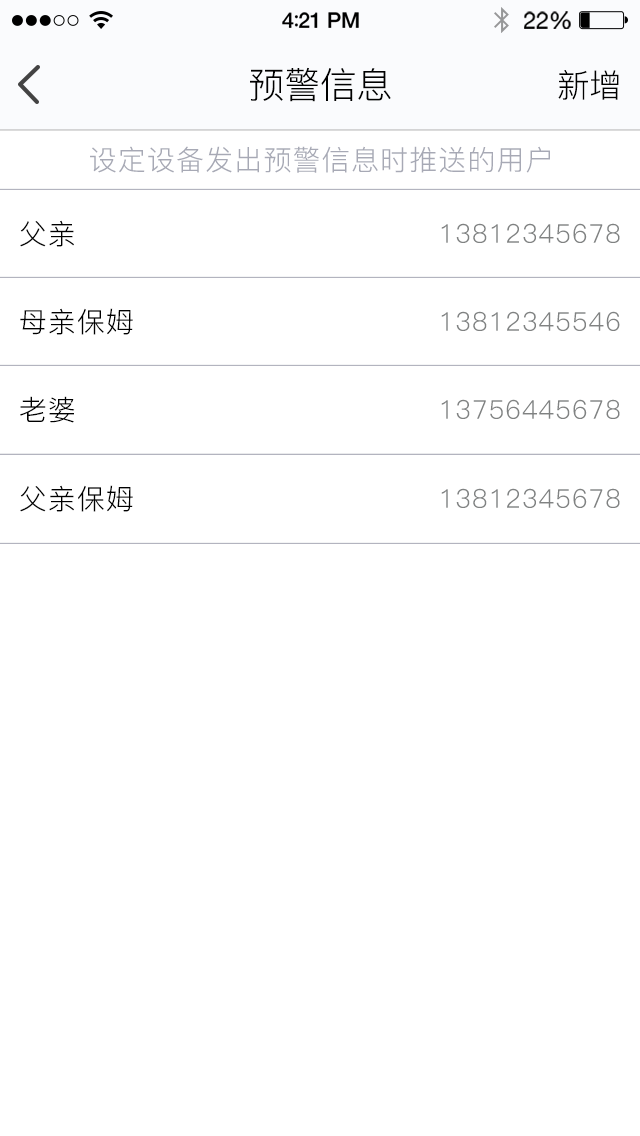
<style>
.page{position:relative;width:640px;height:1136px;background:#ffffff}
.page>*{position:absolute;margin:0}
.t1{font:36px "PingFang-SC-Regular";color:#000000}
.t2{font:32px "PingFang-SC-Regular";color:#000000}
.t3{font:28px "PingFang-SC-Regular";letter-spacing:0.04em;color:#a7a9b5}
.t4{font:28px "PingFang-SC-Regular";letter-spacing:0.04em;color:#000000}
.t5{font:26px "PingFang-SC-Regular";letter-spacing:0.04em;color:#808282}
</style>
<div class="page">
<p class="t1" style="left:250px;top:67px;width:141px;height:35px">预警信息</p>
<p class="t2" style="left:558px;top:70px;width:61px;height:30px">新增</p>
<p class="t3" style="left:90px;top:146px;width:460px;height:27px">设定设备发出预警信息时推送的用户</p>
<p class="t4" style="left:20px;top:220px;width:54px;height:27px">父亲</p>
<p class="t5" style="left:441px;top:223px;width:179px;height:20px">13812345678</p>
<p class="t4" style="left:20px;top:308px;width:113px;height:27px">母亲保姆</p>
<p class="t5" style="left:441px;top:311px;width:179px;height:20px">13812345546</p>
<p class="t4" style="left:20px;top:396px;width:55px;height:27px">老婆</p>
<p class="t5" style="left:441px;top:399px;width:179px;height:20px">13756445678</p>
<p class="t4" style="left:20px;top:485px;width:113px;height:27px">父亲保姆</p>
<p class="t5" style="left:441px;top:488px;width:179px;height:20px">13812345678</p>
</div>
